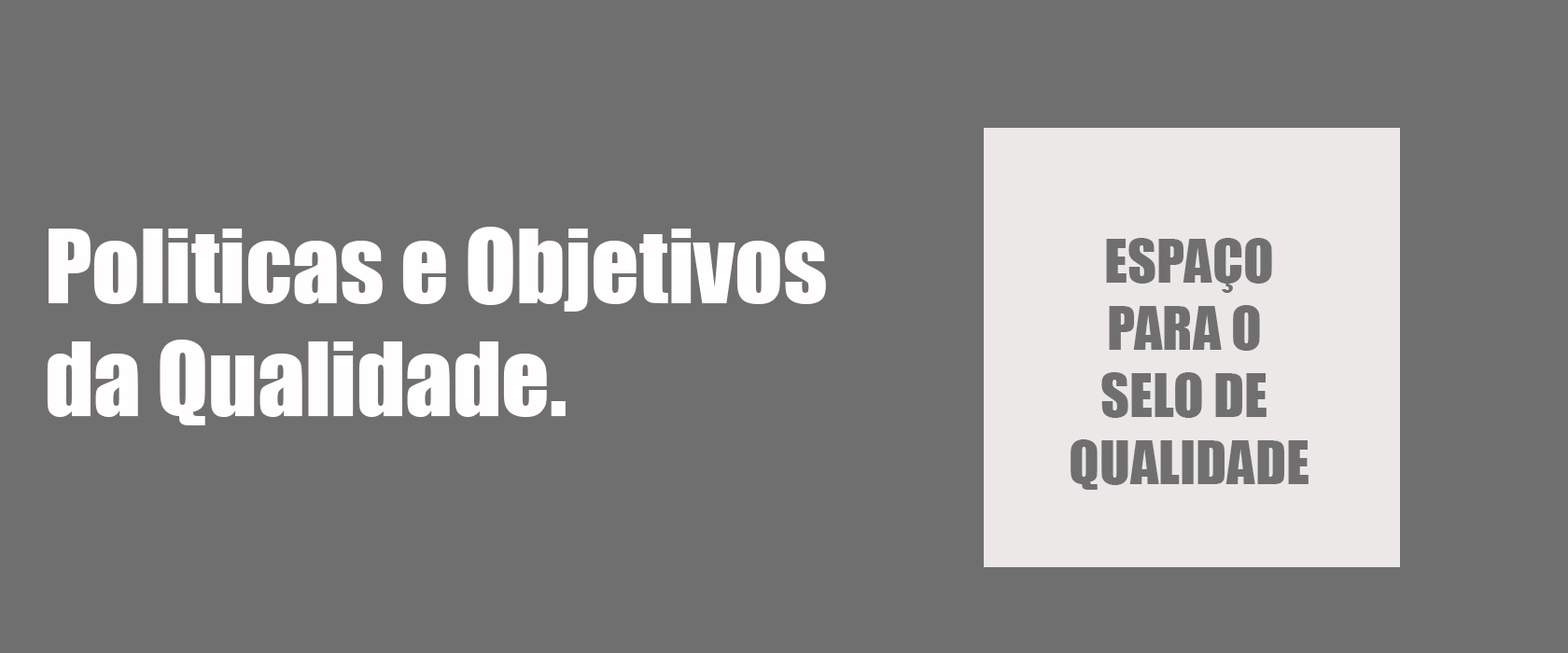
<style>
.page{position:relative;width:1568px;height:653px;background:#706f6f}
.page>*{position:absolute;margin:0}
.t1{font:94px "Impact";color:#fffdfd}
.t2{font:56px "Impact";color:#706f6f}
</style>
<div class="page">
<p class="t1" style="left:47px;top:227px;width:779px;height:199px">Politicas e Objetivos <br>da Qualidade.</p>
<p class="t2" style="left:1071px;top:238px;width:238px;height:252px;text-align:center">ESPAÇO<br>PARA O <br>SELO DE <br>QUALIDADE</p>
</div>
